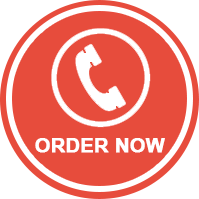
<style>
.page{position:relative;width:199px;height:199px;background:#e74c3c}
.page>*{position:absolute;margin:0}
.t1{font:19.5px "Arial-BoldMT";color:#ffffff;font-weight:bold}
</style>
<div class="page">
<p class="t1" style="left:35px;top:138px;width:130px;height:15px">ORDER NOW</p>
</div>
